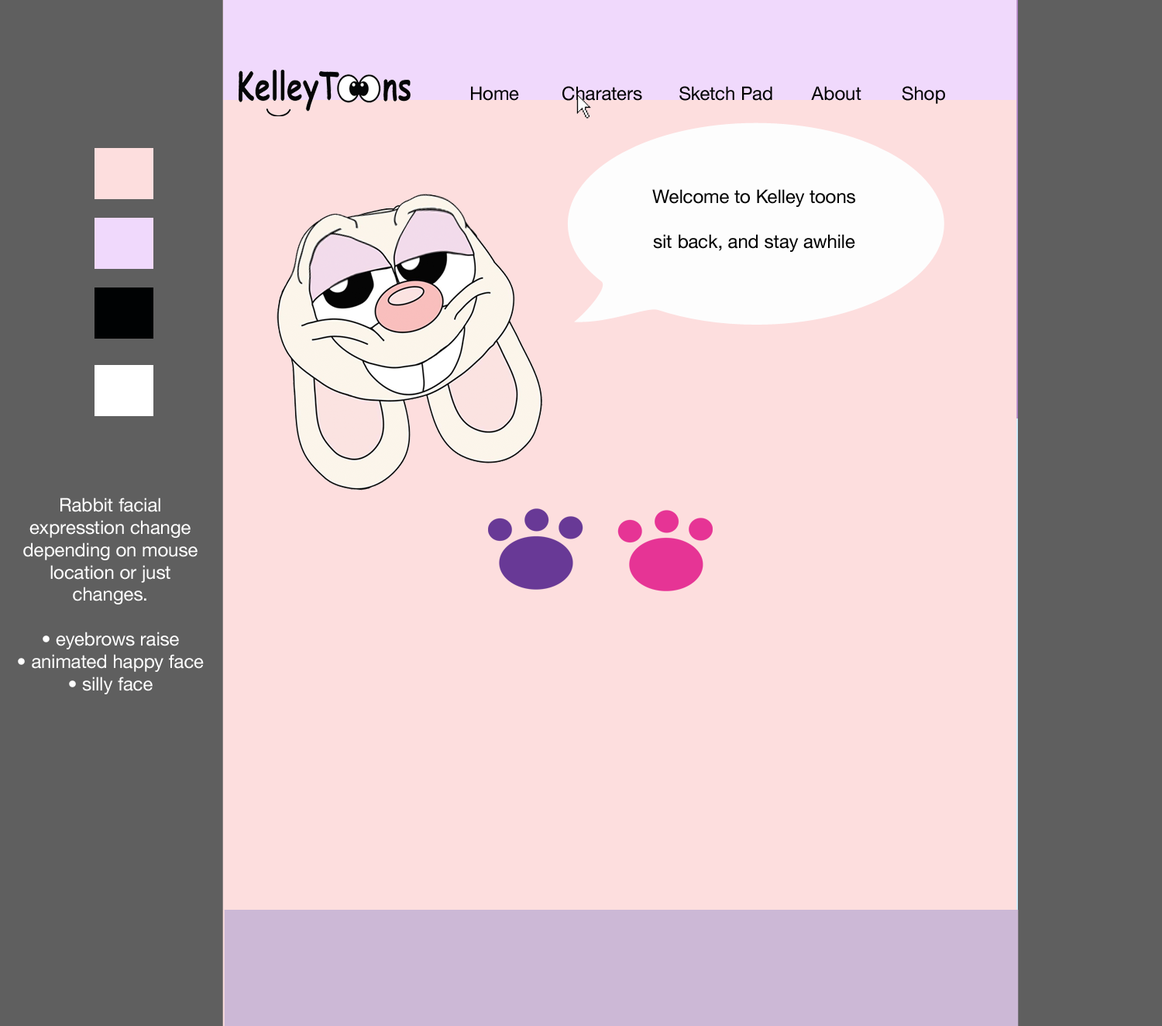
<style>
.page{position:relative;width:1162px;height:1026px;background:#fddede}
.page>*{position:absolute;margin:0}
.t1{font:18.6px "HelveticaNeue";color:#000000}
.t2{font:18.6px "HelveticaNeue";color:#ffffff}
</style>
<div class="page">
<p class="t1" style="left:471px;top:86px;width:48px;height:15px">Home</p>
<p class="t1" style="left:563px;top:86px;width:79px;height:15px">Charaters</p>
<p class="t1" style="left:680px;top:86px;width:93px;height:15px">Sketch Pad</p>
<p class="t1" style="left:811px;top:86px;width:51px;height:15px">About</p>
<p class="t1" style="left:902px;top:86px;width:43px;height:18px">Shop</p>
<p class="t1" style="left:652px;top:189px;width:203px;height:63px;text-align:center">Welcome to Kelley toons<br><br>sit back, and stay awhile</p>
<p class="t2" style="left:18px;top:497px;width:186px;height:197px;text-align:center">Rabbit facial <br>expresstion change depending on mouse location or just changes.<br><br>• eyebrows raise<br>• animated happy face<br>• silly face</p>
</div>
